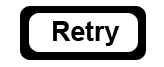
<style>
.page{position:relative;width:164px;height:67px;background:#ffffff}
.page>*{position:absolute;margin:0}
.t1{font:26.7px "Arial-BoldMT";color:#000000}
</style>
<div class="page">
<p class="t1" style="left:53px;top:21px;width:67px;height:25px">Retry</p>
</div>
